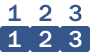
<style>
.page{position:relative;width:90px;height:52px;background:#ffffff}
.page>*{position:absolute;margin:0}
.t1{font:24px "FranklinGothic-Medium";color:#355689}
.t2{font:24px "FranklinGothic-Medium";color:#ffffff}
</style>
<div class="page">
<p class="t1" style="left:8px;top:4px;width:74px;height:18px">1   2   3</p>
<p class="t2" style="left:8px;top:30px;width:74px;height:18px">1   2   3</p>
</div>
